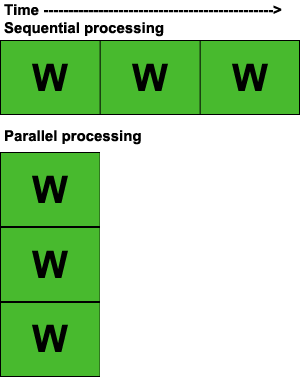
<style>
.page{position:relative;width:300px;height:378px;background:#ffffff}
.page>*{position:absolute;margin:0}
.t1{font:15px "Arial-BoldMT";color:#000000}
</style>
<div class="page">
<p class="t1" style="left:4px;top:4px;width:278px;height:141px">Time ----------------------------------------------&gt;<br>Sequential processing<br><br><br><br><br><br>Parallel processing</p>
</div>
